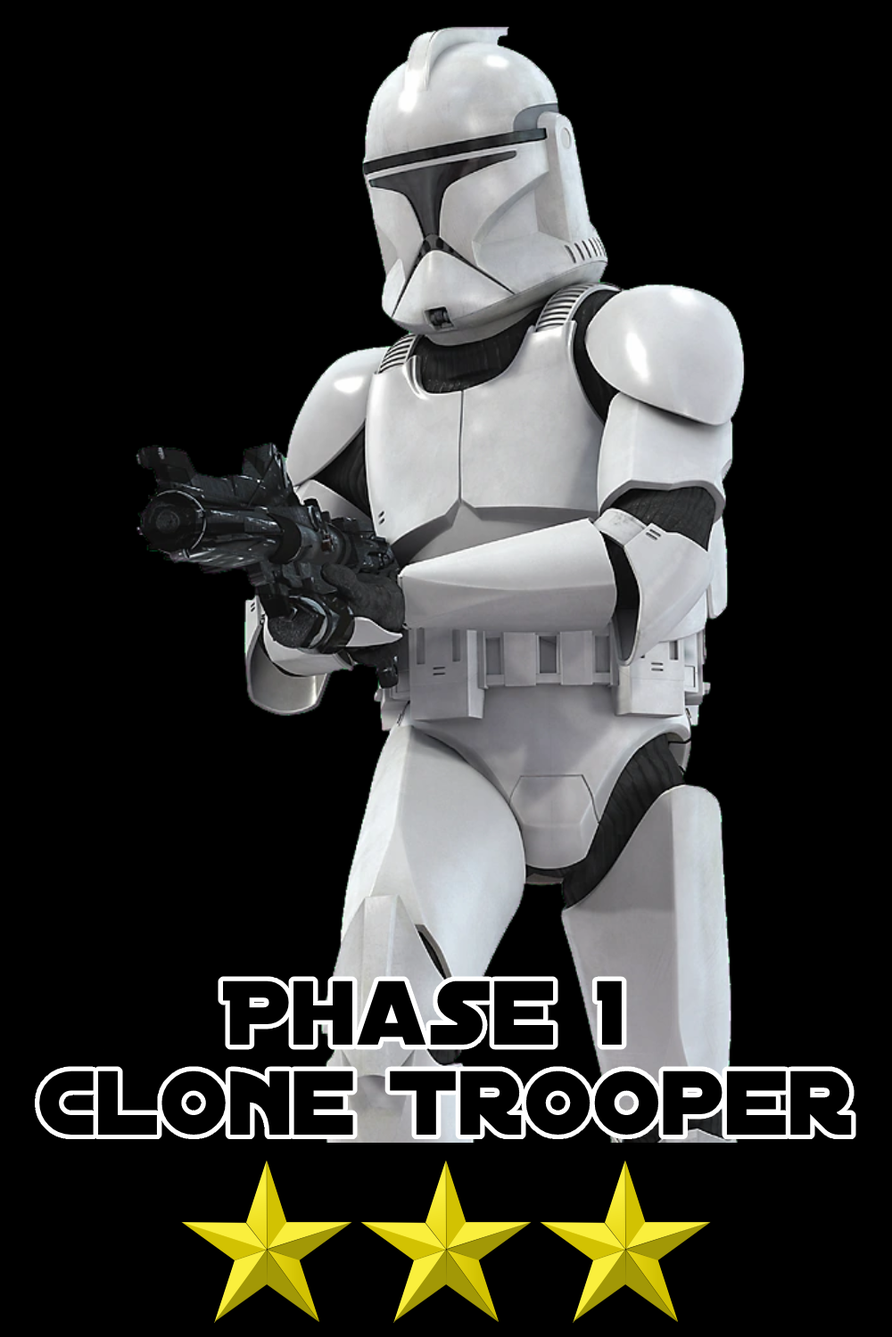
<style>
.page{position:relative;width:892px;height:1337px;background:#000000}
.page>*{position:absolute;margin:0}
.t1{font:97.9px/89.9px "DistantGalaxy";color:#000000}
</style>
<div class="page">
<p class="t1" style="left:39px;top:981px;width:812px;height:154px;text-align:center">Phase 1 <br>Clone Trooper</p>
</div>
